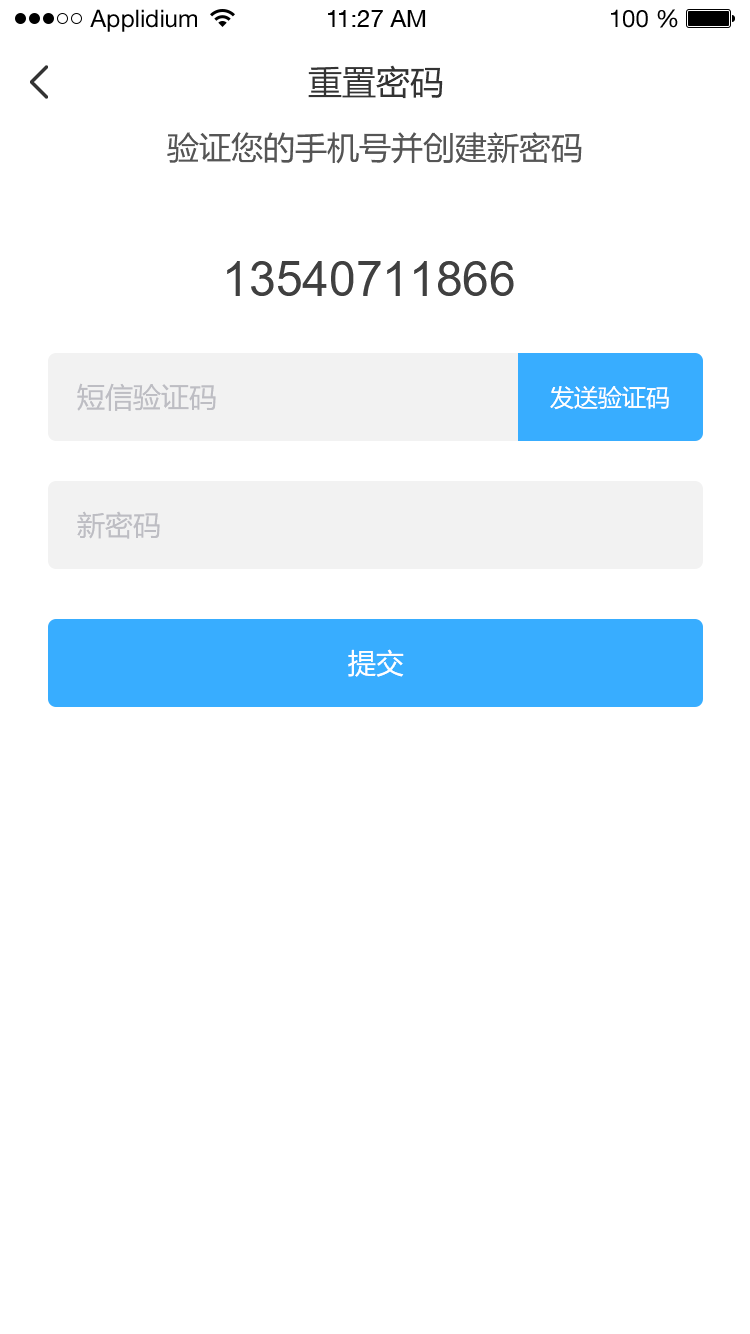
<style>
.page{position:relative;width:750px;height:1334px;background:#ffffff}
.page>*{position:absolute;margin:0}
.t1{font:24px "HelveticaNeueLTStd-Roman";color:#000000}
.t2{font:24px "HelveticaNeueCE-Roman";color:#000000}
.t3{font:34px "MicrosoftYaHei";color:#333333}
.t4{font:32px "MicrosoftYaHei";color:#555555}
.t5{font:48px "ArialMT";color:#404040}
.t6{font:28px "MicrosoftYaHei";color:#bdbdc3}
.t7{font:24px "MicrosoftYaHei";color:#ffffff}
.t8{font:28px "MicrosoftYaHei";color:#ffffff}
</style>
<div class="page">
<p class="t1" style="left:90px;top:9px;width:107px;height:23px">Applidium</p>
<p class="t2" style="left:328px;top:10px;width:98px;height:17px">11:27 AM</p>
<p class="t1" style="left:611px;top:9px;width:67px;height:19px">100 %</p>
<p class="t3" style="left:308px;top:65px;width:135px;height:34px">重置密码</p>
<p class="t4" style="left:167px;top:132px;width:415px;height:32px">验证您的手机号并创建新密码</p>
<p class="t5" style="left:227px;top:261px;width:287px;height:35px">13540711866</p>
<p class="t6" style="left:77px;top:383px;width:139px;height:28px">短信验证码</p>
<p class="t7" style="left:550px;top:386px;width:119px;height:24px">发送验证码</p>
<p class="t6" style="left:77px;top:511px;width:83px;height:28px">新密码</p>
<p class="t8" style="left:348px;top:649px;width:56px;height:28px">提交</p>
</div>
